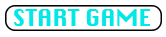
<style>
.page{position:relative;width:166px;height:37px;background:#ffffff}
.page>*{position:absolute;margin:0}
.t1{font:23px "Krungthep";color:#00e9e7}
</style>
<div class="page">
<p class="t1" style="left:14px;top:9px;width:136px;height:17px">START GAME</p>
</div>
